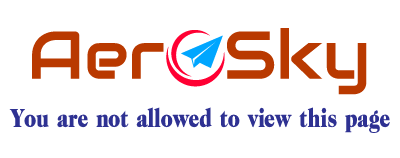
<style>
.page{position:relative;width:400px;height:158px;background:#ffffff}
.page>*{position:absolute;margin:0}
.t1{font:26.2px "Mimmo";color:#2e3192}
</style>
<div class="page">
<p class="t1" style="left:9px;top:107px;width:381px;height:26px">You are not allowed to view this page</p>
</div>
